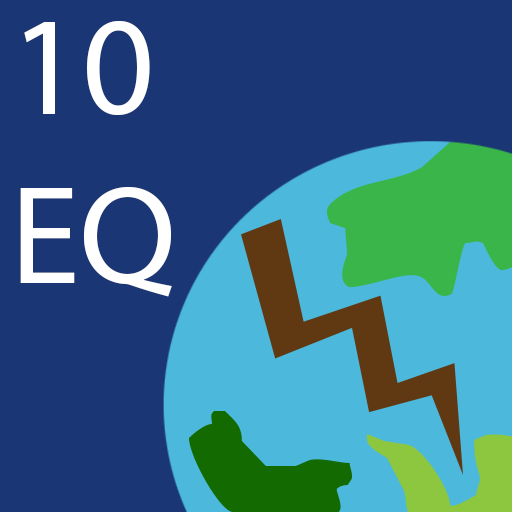
<style>
.page{position:relative;width:512px;height:512px;background:#1a3674}
.page>*{position:absolute;margin:0}
.t1{font:141px "MyriadPro-Regular";color:#ffffff}
</style>
<div class="page">
<p class="t1" style="left:20px;top:20px;width:152px;height:277px">10 <br>EQ</p>
</div>
